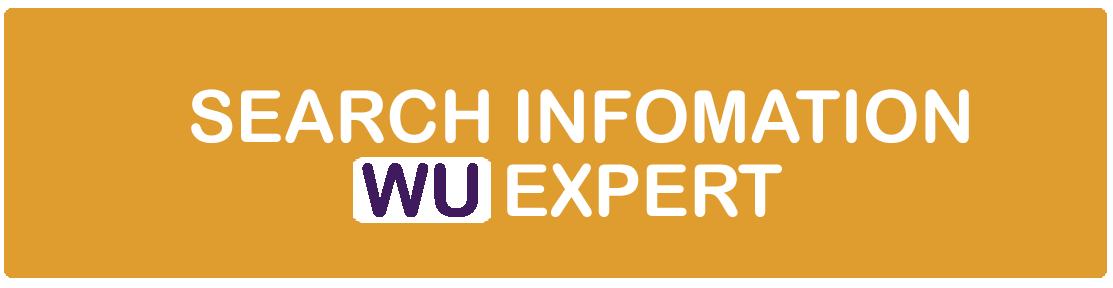
<style>
.page{position:relative;width:1113px;height:288px;background:#df9d2f}
.page>*{position:absolute;margin:0}
.t1{font:72px "ArialRoundedMTBold";color:#ffffff}
</style>
<div class="page">
<p class="t1" style="left:191px;top:89px;width:778px;height:54px">SEARCH INFOMATION</p>
</div>
